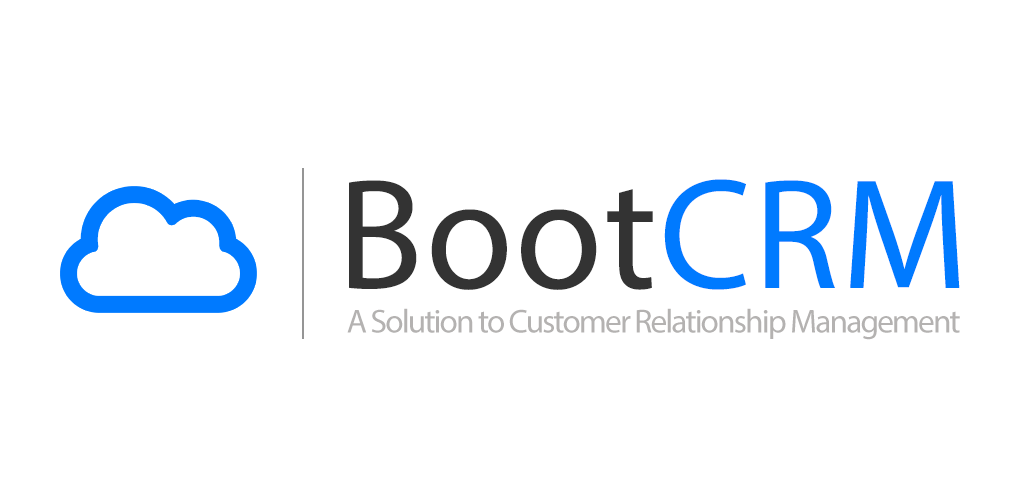
<style>
.page{position:relative;width:1024px;height:500px;background:#ffffff}
.page>*{position:absolute;margin:0}
.t1{font:158.3px "MyriadPro-Regular";letter-spacing:0.015em;color:#333333}
.t2{font:158.3px "MyriadPro-Regular";letter-spacing:0.015em;color:#007aff}
.t3{font:33.3px "MyriadPro-Regular";letter-spacing:-0.055em;color:#b4b2b1}
</style>
<div class="page">
<p class="t1" style="left:349px;top:179px;width:611px;height:111px">Boot<span class="t2">CRM</span></p>
<p class="t3" style="left:347px;top:308px;width:613px;height:32px">A Solution to Customer Relationship Management</p>
</div>
